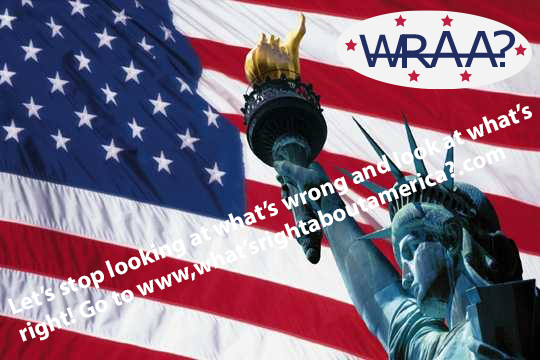
<style>
.page{position:relative;width:540px;height:360px}
.page>*{position:absolute;margin:0}
.t1{font:24px "MyriadPro-Bold";color:#ffffff}
</style>
<div class="page">
<p class="t1" style="left:7px;top:103px;width:525px;height:239px;rotate:-21deg">Let’s stop looking at what’s wrong and look at what’s right! Go to www,what’srightaboutamerica?.com</p>
</div>
